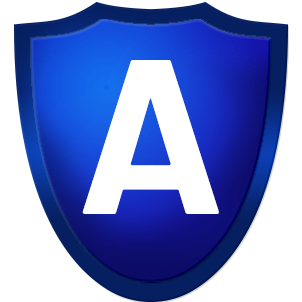
<style>
.page{position:relative;width:302px;height:302px;background:#ffffff}
.page>*{position:absolute;margin:0}
.t1{font:220px "Barlow-Bold";color:#ffffff}
</style>
<div class="page">
<p class="t1" style="left:82px;top:60px;width:137px;height:154px">A</p>
</div>
